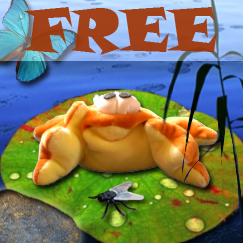
<style>
.page{position:relative;width:243px;height:243px}
.page>*{position:absolute;margin:0}
.t1{font:60px "SnapITC-Regular";color:#a1411a}
</style>
<div class="page">
<p class="t1" style="left:24px;top:7px;width:193px;height:48px">FREE</p>
</div>
